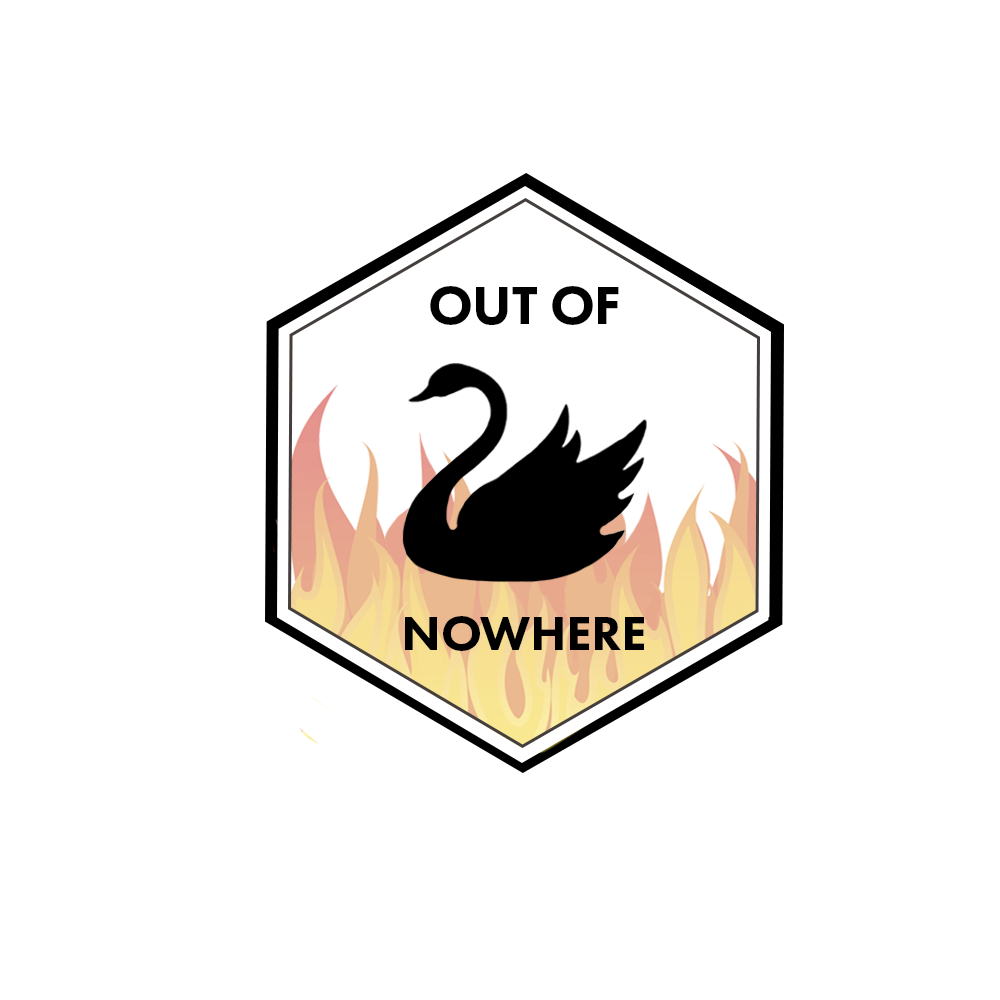
<style>
.page{position:relative;width:1000px;height:1000px;background:#ffffff}
.page>*{position:absolute;margin:0}
.t1{font:50px/37.5px "FuturaPT-Heavy";letter-spacing:-0.005em;color:#000000}
.t2{font:55.4px "FuturaPT-Medium";letter-spacing:-0.005em;color:#000000}
.t3{font:55.4px "FuturaPT-Heavy";letter-spacing:-0.005em;color:#000000}
</style>
<div class="page">
<p class="t1" style="left:405px;top:286px;width:239px;height:365px"><span class="t2">   </span><span class="t3">OUT OF<br><br><br><br><br> </span>NOWHERE</p>
</div>
